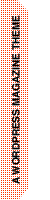
<style>
.page{position:relative;width:50px;height:200px;background:#ffffff}
.page>*{position:absolute;margin:0}
.t1{font:10px "Helvetica-Bold";color:#000000}
</style>
<div class="page">
<p class="t1" style="left:11px;top:15px;width:9px;height:169px;rotate:-90deg">A WORDPRESS MAGAZINE THEME</p>
</div>
